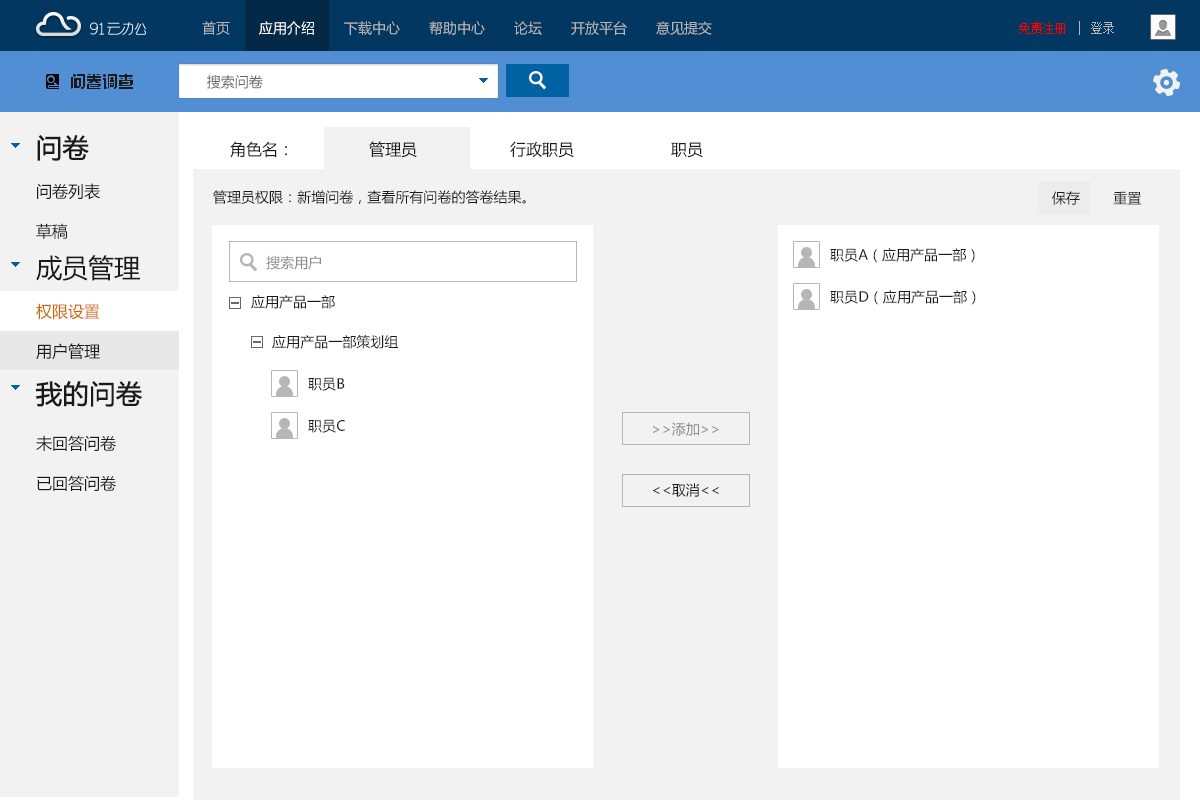
<style>
.page{position:relative;width:1200px;height:800px;background:#ffffff}
.page>*{position:absolute;margin:0}
.t1{font:14px "MicrosoftYaHei";color:#b6b6b6}
.t2{font:14px "MicrosoftYaHei";color:#ffffff}
.t3{font:12px "SimSun";color:#fe0000}
.t4{font:12px "SimSun";color:#b6b6b6}
.t5{font:14px "MicrosoftYaHei";color:#666666}
.t6{font:16px/40px "MicrosoftYaHei";color:#1a1a1a}
.t7{font:26px/40px "MicrosoftYaHei";color:#1a1a1a;font-weight:bold}
.t8{font:26px/40px "MicrosoftYaHei";color:#1a1a1a}
.t9{font:16px/40px "MicrosoftYaHei";color:#d16700}
.t10{font:26px/46px "MicrosoftYaHei";color:#1a1a1a;font-weight:bold}
.t11{font:16px/46px "MicrosoftYaHei";color:#1a1a1a}
.t12{font:16px "MicrosoftYaHei";color:#1a1a1a}
.t13{font:14px "MicrosoftYaHei";color:#1a1a1a}
.t14{font:14px "MicrosoftYaHei";color:#8b8b8b}
</style>
<div class="page">
<p class="t1" style="left:202px;top:21px;width:510px;height:14px">首页       <span class="t2">应用介绍</span>       下载中心       帮助中心       论坛       开放平台       意见提交</p>
<p class="t3" style="left:1019px;top:22px;width:95px;height:12px">免费注册<span class="t4">    登录</span></p>
<p class="t5" style="left:207px;top:75px;width:56px;height:14px">搜索问卷</p>
<p class="t6" style="left:36px;top:135px;width:106px;height:356px"><span class="t7">问卷<br></span>问卷列表<br>草稿<br><span class="t8">成员管理<br></span><span class="t9">权限设置<br></span>用户管理<br><span class="t10">我的问卷<br></span><span class="t11">未回答问卷<br></span>已回答问卷</p>
<p class="t12" style="left:230px;top:141px;width:57px;height:17px">角色名：</p>
<p class="t12" style="left:369px;top:141px;width:48px;height:17px">管理员</p>
<p class="t12" style="left:510px;top:141px;width:64px;height:17px">行政职员</p>
<p class="t12" style="left:671px;top:142px;width:32px;height:16px">职员</p>
<p class="t13" style="left:213px;top:190px;width:313px;height:14px">管理员权限：新增问卷，查看所有问卷的答卷结果。</p>
<p class="t13" style="left:1052px;top:191px;width:90px;height:14px">保存        重置</p>
<p class="t14" style="left:266px;top:255px;width:55px;height:15px">搜索用户</p>
<p class="t13" style="left:830px;top:248px;width:145px;height:15px">职员A（应用产品一部）</p>
<p class="t13" style="left:830px;top:290px;width:146px;height:15px">职员D（应用产品一部）</p>
<p class="t13" style="left:251px;top:295px;width:84px;height:14px">应用产品一部</p>
<p class="t13" style="left:272px;top:335px;width:126px;height:14px">应用产品一部策划组</p>
<p class="t13" style="left:308px;top:377px;width:37px;height:14px">职员B</p>
<p class="t13" style="left:308px;top:419px;width:37px;height:14px">职员C</p>
<p class="t14" style="left:653px;top:422px;width:66px;height:14px">&gt;&gt;添加&gt;&gt;</p>
<p class="t13" style="left:653px;top:483px;width:66px;height:14px">&lt;&lt;取消&lt;&lt;</p>
</div>
